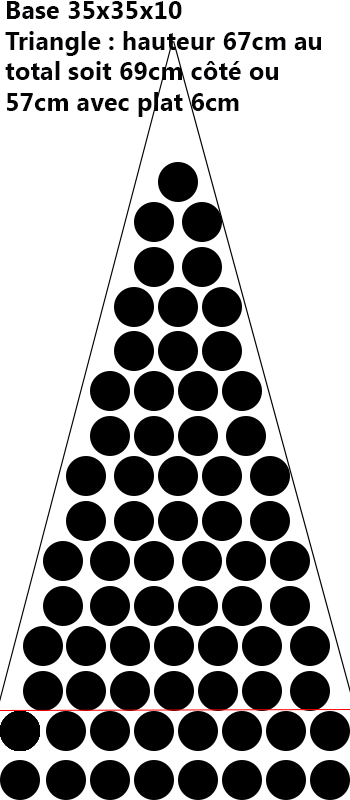
<style>
.page{position:relative;width:350px;height:800px;background:#ffffff}
.page>*{position:absolute;margin:0}
.t1{font:25.4px "SegoeUI-Bold";color:#040406}
</style>
<div class="page">
<p class="t1" style="left:5px;top:1px;width:316px;height:116px">Base 35x35x10<br>Triangle : hauteur 67cm au total soit 69cm côté ou 57cm avec plat 6cm</p>
</div>
